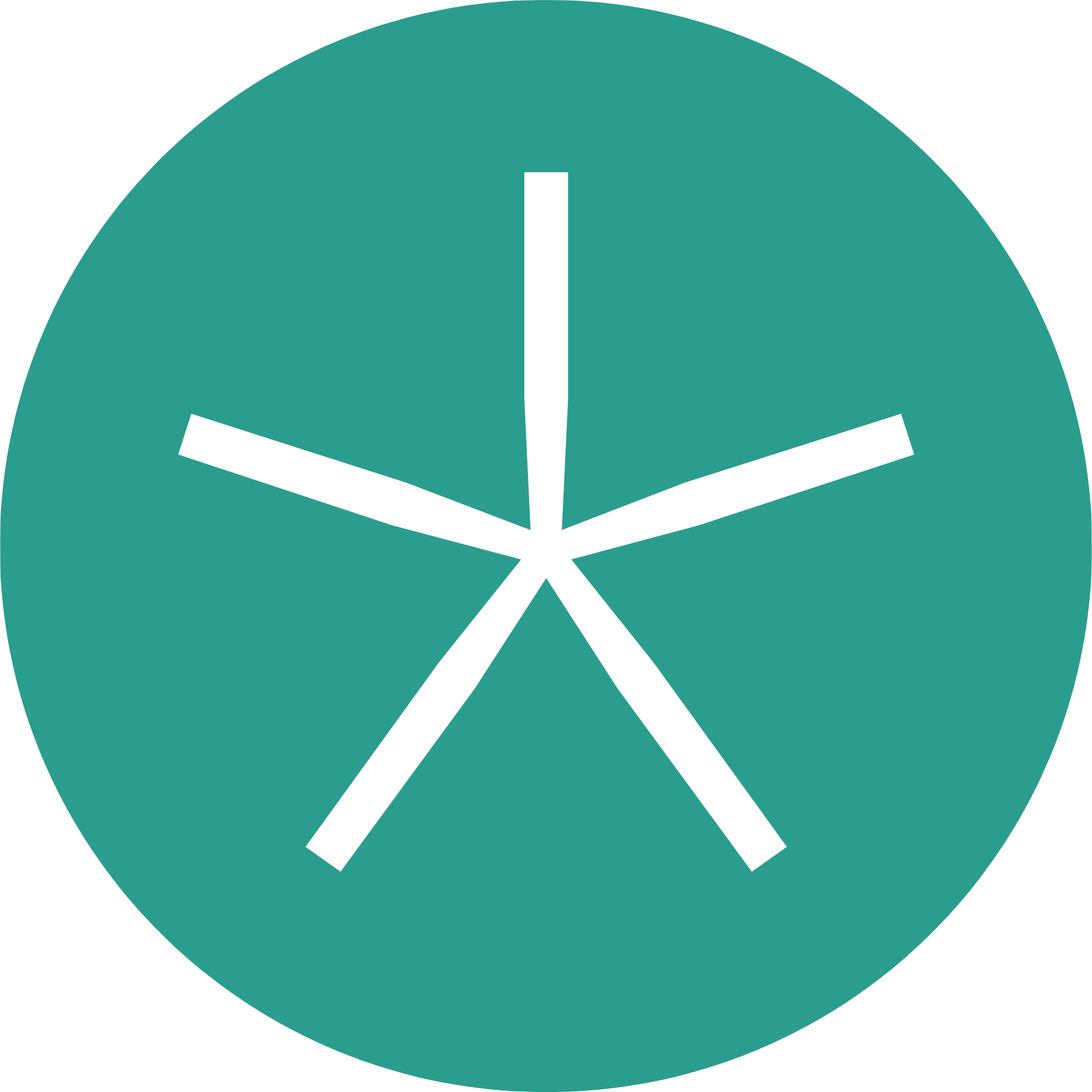
<style>
.page{position:relative;width:1092px;height:1092px;background:#2a9d8f}
.page>*{position:absolute;margin:0}
.t1{font:1723.7px "WorkSans-ExtraLight";color:#ffffff}
</style>
<div class="page">
<p class="t1" style="left:178px;top:172px;width:737px;height:700px">*</p>
</div>
